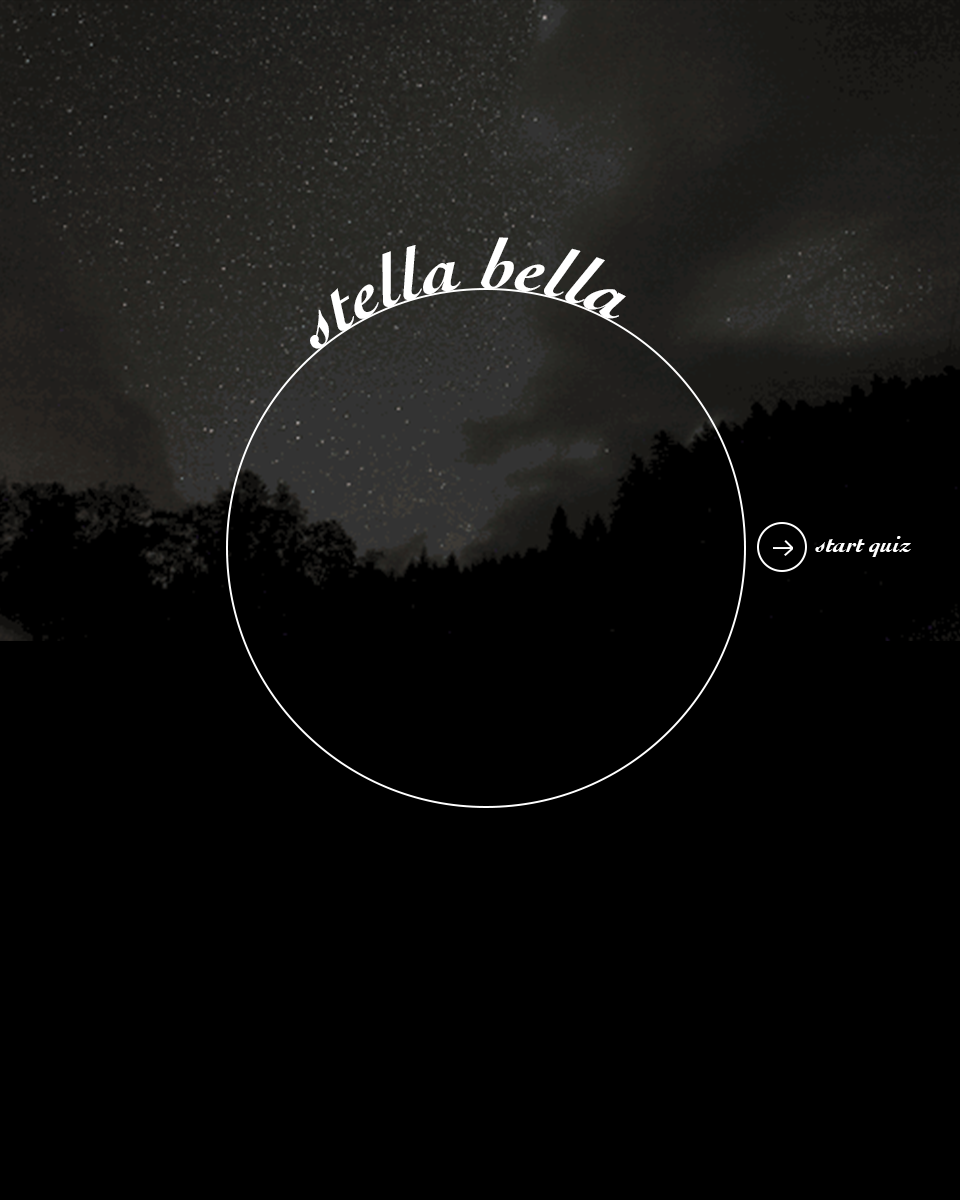
<style>
.page{position:relative;width:960px;height:1200px;background:#000000}
.page>*{position:absolute;margin:0}
.t1{font:72px "Cochin-BoldItalic";color:#ffffff}
.t2{font:24px "Cochin-BoldItalic";color:#ffffff}
</style>
<div class="page">
<p class="t1" style="left:310px;top:237px;width:316px;height:112px">stella bella</p>
<p class="t2" style="left:815px;top:536px;width:96px;height:21px">start quiz</p>
</div>
